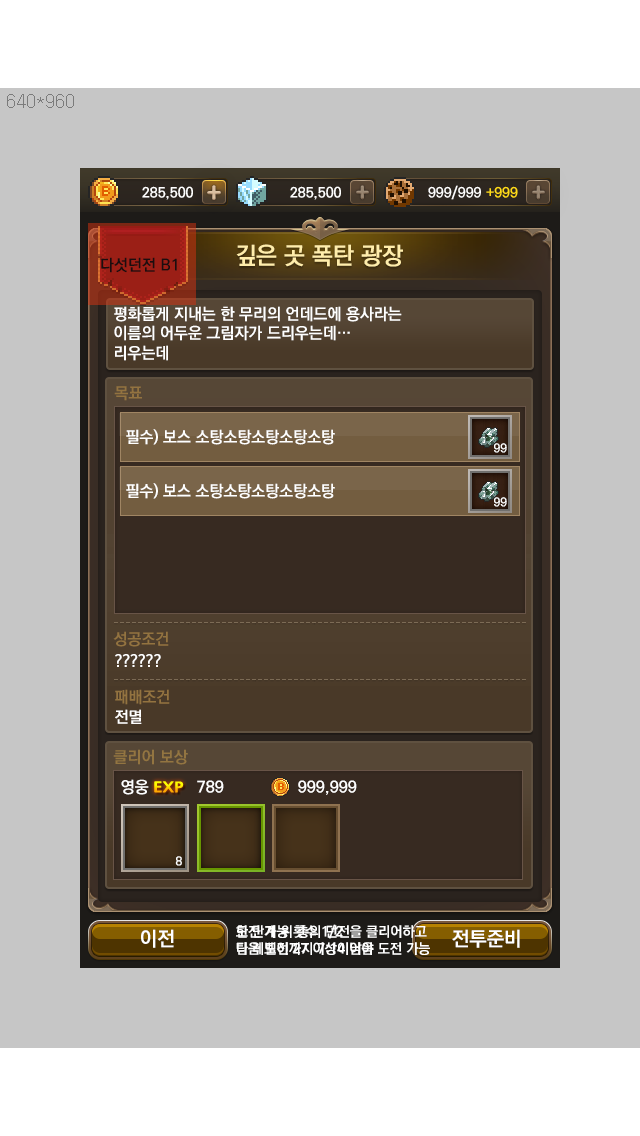
<style>
.page{position:relative;width:640px;height:1136px;background:#c6c6c6}
.page>*{position:absolute;margin:0}
.t1{font:24px "KoPubDotumBold";color:#ffedab}
.t2{font:16px "KoPubDotumBold";color:#1b0e0f}
.t3{font:16px "KoPubDotumBold";color:#ffffff}
.t4{font:16px "KoPubDotumBold";color:#937340}
.t5{font:12px "KoPubDotumBold";color:#ffffff}
.t6{font:16px "KoPubDotumBold";color:#937541}
.t7{font:20px "KoPubDotumBold";color:#ffffff}
.t8{font:14px "KoPubDotumBold";color:#ffffff}
</style>
<div class="page">
<p class="t1" style="left:236px;top:244px;width:167px;height:23px">깊은 곳 폭탄 광장</p>
<p class="t2" style="left:101px;top:257px;width:76px;height:16px">다섯던전 B1</p>
<p class="t3" style="left:114px;top:306px;width:288px;height:55px">평화롭게 지내는 한 무리의 언데드에 용사라는 <br>이름의 어두운 그림자가 드리우는데…<br>리우는데</p>
<p class="t4" style="left:114px;top:386px;width:28px;height:15px">목표</p>
<p class="t3" style="left:126px;top:429px;width:209px;height:16px">필수) 보스 소탕소탕소탕소탕소탕</p>
<p class="t5" style="left:494px;top:443px;width:13px;height:10px">99</p>
<p class="t3" style="left:126px;top:483px;width:209px;height:16px">필수) 보스 소탕소탕소탕소탕소탕</p>
<p class="t5" style="left:494px;top:497px;width:13px;height:10px">99</p>
<p class="t4" style="left:113px;top:631px;width:56px;height:16px">성공조건</p>
<p class="t3" style="left:115px;top:654px;width:46px;height:13px">??????</p>
<p class="t4" style="left:115px;top:689px;width:55px;height:16px">패배조건</p>
<p class="t3" style="left:115px;top:709px;width:27px;height:15px">전멸</p>
<p class="t6" style="left:113px;top:749px;width:75px;height:16px">클리어 보상</p>
<p class="t3" style="left:121px;top:779px;width:28px;height:16px">영웅</p>
<p class="t3" style="left:197px;top:780px;width:27px;height:13px">789</p>
<p class="t3" style="left:298px;top:780px;width:59px;height:15px">999,999</p>
<p class="t5" style="left:175px;top:856px;width:7px;height:10px">8</p>
<p class="t7" style="left:141px;top:929px;width:33px;height:19px">이전</p>
<p class="t8" style="left:236px;top:924px;width:138px;height:31px">도전 가능 횟수 1/2<br>다음 도전까지 7:14 남음</p>
<p class="t8" style="left:236px;top:925px;width:194px;height:30px">한 단계 위 층의 던전을 클리어하고 <br>팀 레벨이 27 이상이어야 도전 가능</p>
<p class="t7" style="left:452px;top:929px;width:68px;height:19px">전투준비</p>
</div>
